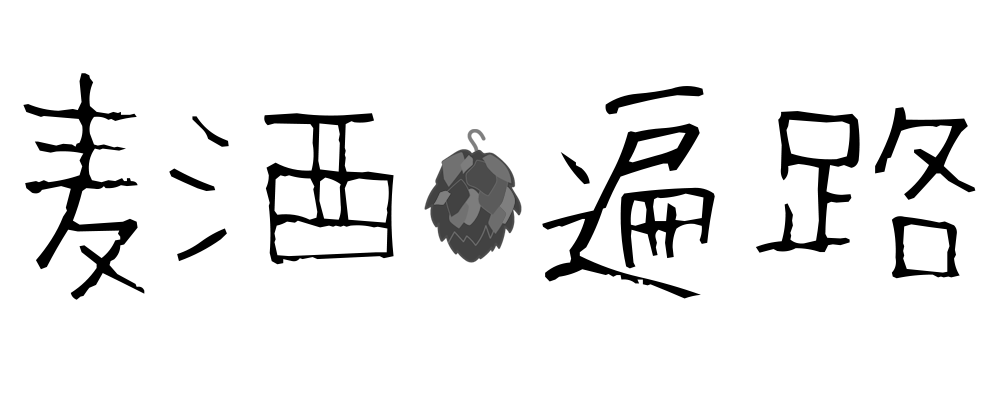
<style>
.page{position:relative;width:1000px;height:400px;background:#ffffff}
.page>*{position:absolute;margin:0}
.t1{font:220px "ShigotoMemogaki";color:#000000}
.t2{font:230px "ShigotoMemogaki";color:#000000}
.t3{font:230px "ShigotoMemogaki";letter-spacing:-0.025em;color:#000000}
</style>
<div class="page">
<p class="t1" style="left:23px;top:73px;width:953px;height:227px"><span class="t2">麦</span><span class="t3">酒  </span>遍路</p>
</div>
